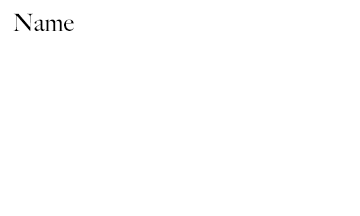
<style>
.page{position:relative;width:360px;height:216px;background:#ffffff}
.page>*{position:absolute;margin:0}
.t1{font:24px "BigCaslon-Medium";color:#000000}
</style>
<div class="page">
<p class="t1" style="left:13px;top:13px;width:61px;height:18px">Name</p>
</div>
